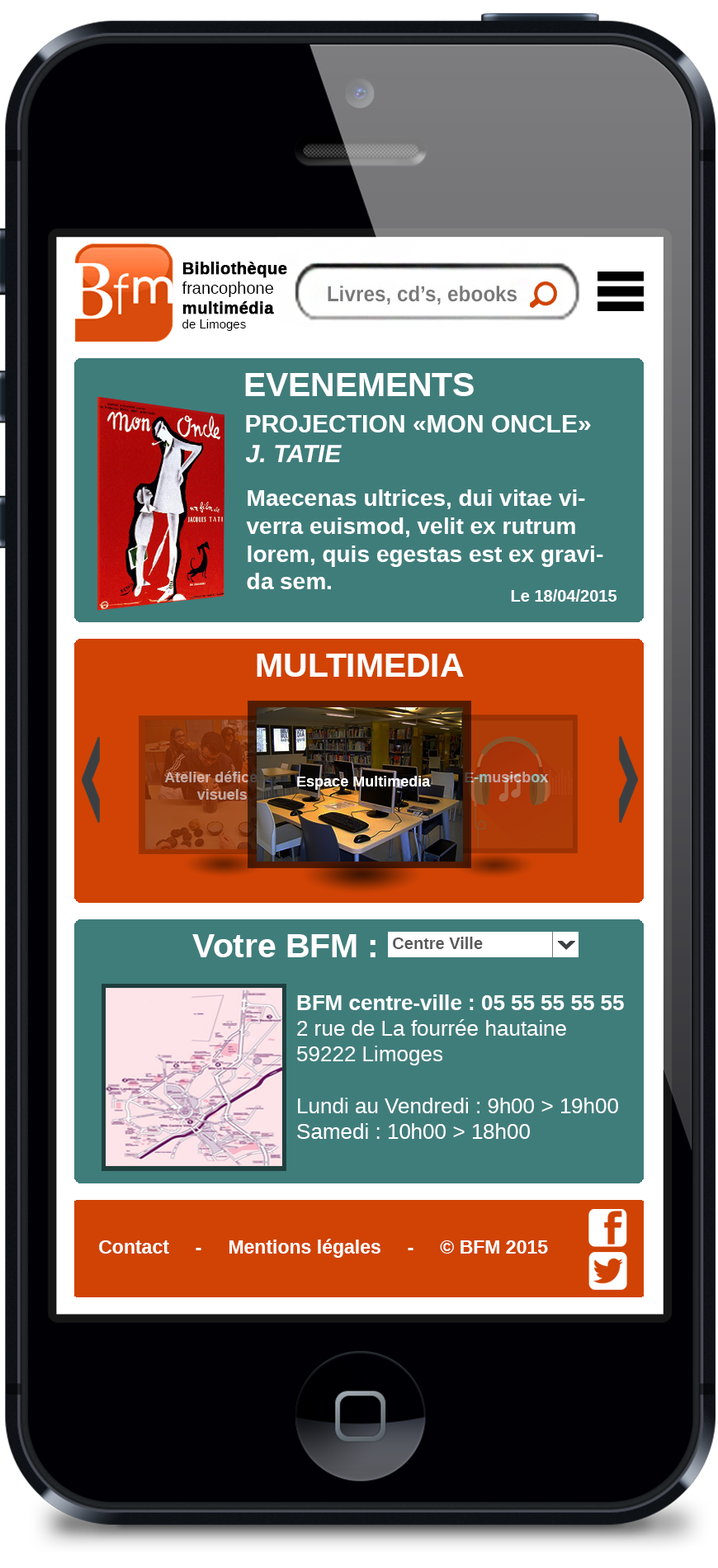
<style>
.page{position:relative;width:718px;height:1568px}
.page>*{position:absolute;margin:0}
.t1{font:16.5px "LiberationSans-Bold";color:#000000;font-weight:bold}
.t2{font:16.5px "LiberationSans";color:#000000}
.t3{font:12.4px "LiberationSans";color:#000000}
.t4{font:21.5px "LiberationSans-Bold";color:#797979;scale:0.93 1}
.t5{font:33.6px "LiberationSans-Bold";color:#ffffff}
.t6{font:24.8px "LiberationSans-Bold";color:#ffffff;text-transform:uppercase}
.t7{font:24.8px "LiberationSans-Bold";color:#ffffff;text-transform:uppercase;font-style:italic}
.t8{font:23.1px "LiberationSans-Bold";color:#ffffff}
.t9{font:16.5px "LiberationSans-Bold";color:#ffffff}
.t10{font:14.9px "LiberationSans-Bold";color:#c1a69f}
.t11{font:14.9px "LiberationSans-Bold"}
.t12{font:14.9px "LiberationSans-Bold";color:#ffffff}
.t13{font:16.5px "LiberationSans-Bold";color:#585656}
.t14{font:21.5px "LiberationSans";color:#ffffff}
.t15{font:21.5px "LiberationSans-Bold";color:#ffffff}
.t16{font:19px "LiberationSans-Bold";color:#ffffff}
</style>
<div class="page">
<p class="t1" style="left:182px;top:262px;width:105px;height:69px">Bibliothèque<br><span class="t2">francophone<br></span>multimédia<br><span class="t3">de Limoges</span></p>
<p class="t4" style="left:328px;top:286px;width:189px;height:19px">Livres, cd’s, ebooks</p>
<p class="t5" style="left:245px;top:373px;width:229px;height:23px">EVENEMENTS</p>
<p class="t6" style="left:246px;top:415px;width:345px;height:48px">Projection «Mon oncle» <span class="t7">J. Tatie</span></p>
<p class="t8" style="left:246px;top:489px;width:357px;height:100px">Maecenas ultrices, dui vitae viverra euismod, velit ex rutrum lorem, quis egestas est ex gravida sem.</p>
<p class="t9" style="left:511px;top:589px;width:105px;height:13px">Le 18/04/2015</p>
<p class="t5" style="left:257px;top:654px;width:207px;height:23px">MULTIMEDIA</p>
<p class="t10" style="left:164px;top:771px;width:116px;height:29px;text-align:center">Atelier déficents <br>visuels</p>
<p class="t11" style="left:465px;top:772px;width:83px;height:10px">E-musicbox</p>
<p class="t12" style="left:297px;top:776px;width:134px;height:14px">Espace Multimedia</p>
<p class="t5" style="left:192px;top:934px;width:183px;height:23px">Votre BFM :</p>
<p class="t13" style="left:393px;top:937px;width:90px;height:12px">Centre Ville</p>
<p class="t14" style="left:297px;top:994px;width:327px;height:145px"><span class="t15">BFM centre-ville : 05 55 55 55 55<br></span>2 rue de La fourrée hautaine<br>59222 Limoges<br><br>Lundi au Vendredi : 9h00 &gt; 19h00<br>Samedi : 10h00 &gt; 18h00</p>
<p class="t16" style="left:99px;top:1239px;width:449px;height:19px">Contact     -     Mentions légales     -     © BFM 2015</p>
</div>
